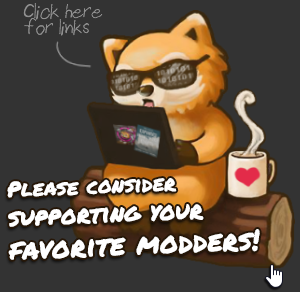
<style>
.page{position:relative;width:300px;height:292px;background:#333333}
.page>*{position:absolute;margin:0}
.t1{font:14px "ThinPencilHandwriting";color:#909090;font-weight:bold}
.t2{font:28px "PermanentMarker";color:#ffffff;font-weight:bold}
.t3{font:21px "PermanentMarker";color:#ffffff;font-weight:bold}
.t4{font:24px "PermanentMarker";color:#ffffff;font-weight:bold}
</style>
<div class="page">
<p class="t1" style="left:23px;top:3px;width:80px;height:33px">Click here for links</p>
<p class="t2" style="left:7px;top:178px;width:253px;height:82px;rotate:-2deg"><span class="t3">Please consider <br></span><span class="t4">supporting your </span>favorite modders!</p>
</div>
